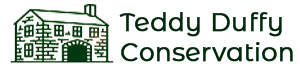
<style>
.page{position:relative;width:300px;height:80px;background:#ffffff}
.page>*{position:absolute;margin:0}
.t1{font:25px "Montserrat-Regular";color:#013a12;font-weight:bold}
</style>
<div class="page">
<p class="t1" style="left:119px;top:12px;width:174px;height:50px">Teddy Duffy <br>Conservation</p>
</div>
